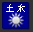
<style>
.page{position:relative;width:33px;height:32px;background:#000090}
.page>*{position:absolute;margin:0}
.t1{font:10.4px "SimSun";color:#ffffff}
</style>
<div class="page">
<p class="t1" style="left:6px;top:4px;width:19px;height:8px">土木</p>
</div>
